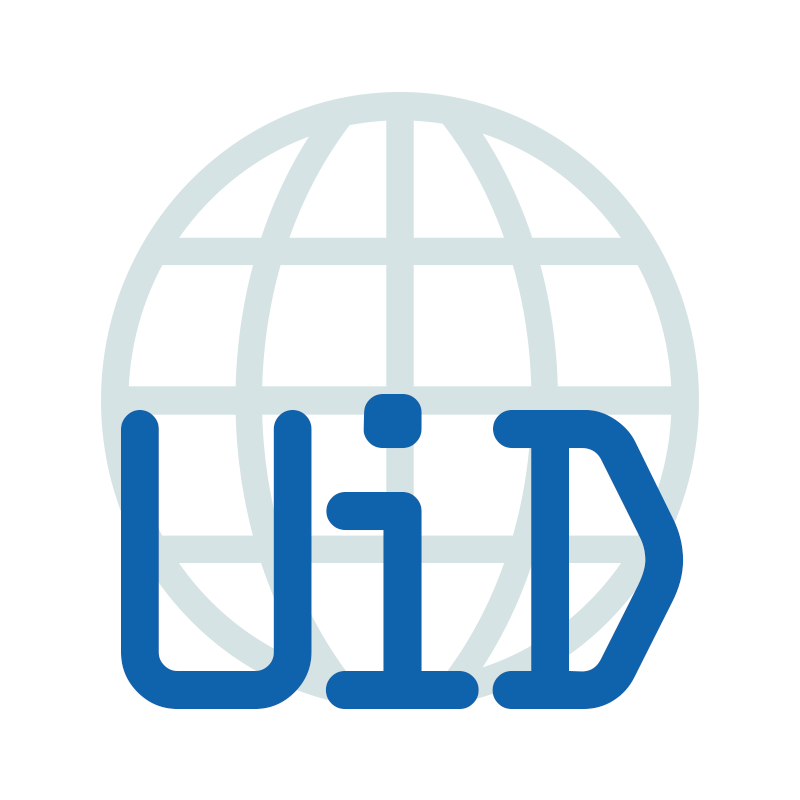
<style>
.page{position:relative;width:800px;height:800px;background:#ffffff}
.page>*{position:absolute;margin:0}
.t1{font:460px "OCRAExtended";letter-spacing:-0.2em;color:#0f62ac}
.t2{font:427.3px "OCRAExtended";color:#c3c3c3}
</style>
<div class="page">
<p class="t1" style="left:121px;top:394px;width:563px;height:315px"><span class="t2"><br></span>UiD</p>
</div>
